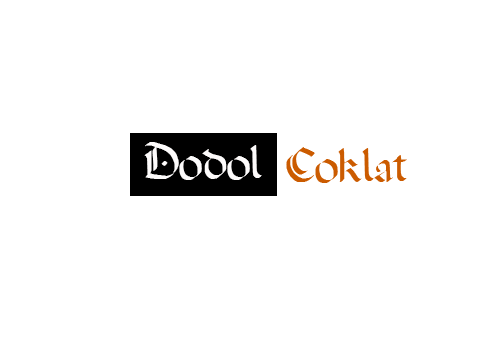
<style>
.page{position:relative;width:504px;height:360px;background:#ffffff}
.page>*{position:absolute;margin:0}
.t1{font:48px "ADarkWedding";color:#fdfbfb}
.t2{font:48px "ADarkWedding";color:#cb5b00}
</style>
<div class="page">
<p class="t1" style="left:144px;top:142px;width:118px;height:38px">Dodol</p>
<p class="t2" style="left:286px;top:147px;width:121px;height:36px">Coklat</p>
</div>
